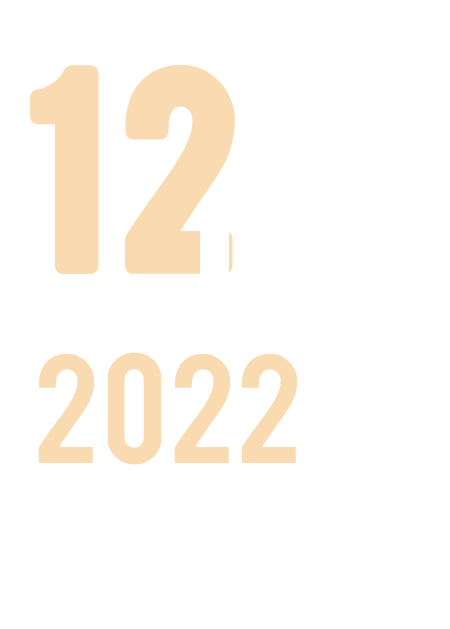
<style>
.page{position:relative;width:450px;height:629px;background:#ffffff}
.page>*{position:absolute;margin:0}
.t1{font:218.7px "Bebas";color:#fadbb1;text-transform:uppercase}
.t2{font:122.2px "Bebas";color:#fadbb1;text-transform:uppercase;scale:1.03 1}
</style>
<div class="page">
<p class="t1" style="left:37px;top:72px;width:191px;height:195px">1 2</p>
<p class="t2" style="left:38px;top:352px;width:259px;height:113px">2022</p>
</div>
